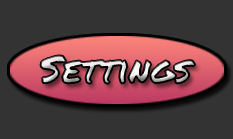
<style>
.page{position:relative;width:233px;height:139px;background:#333333}
.page>*{position:absolute;margin:0}
.t1{font:37.3px "PermanentMarker-Regular"}
</style>
<div class="page">
<p class="t1" style="left:40px;top:55px;width:155px;height:29px">Settings</p>
</div>
